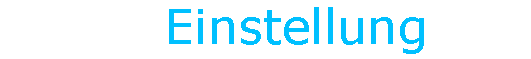
<style>
.page{position:relative;width:531px;height:59px;background:#ffffff}
.page>*{position:absolute;margin:0}
.t1{font:48px "Verdana";color:#00c0ff}
</style>
<div class="page">
<p class="t1" style="left:169px;top:7px;width:255px;height:47px">Einstellung</p>
</div>
